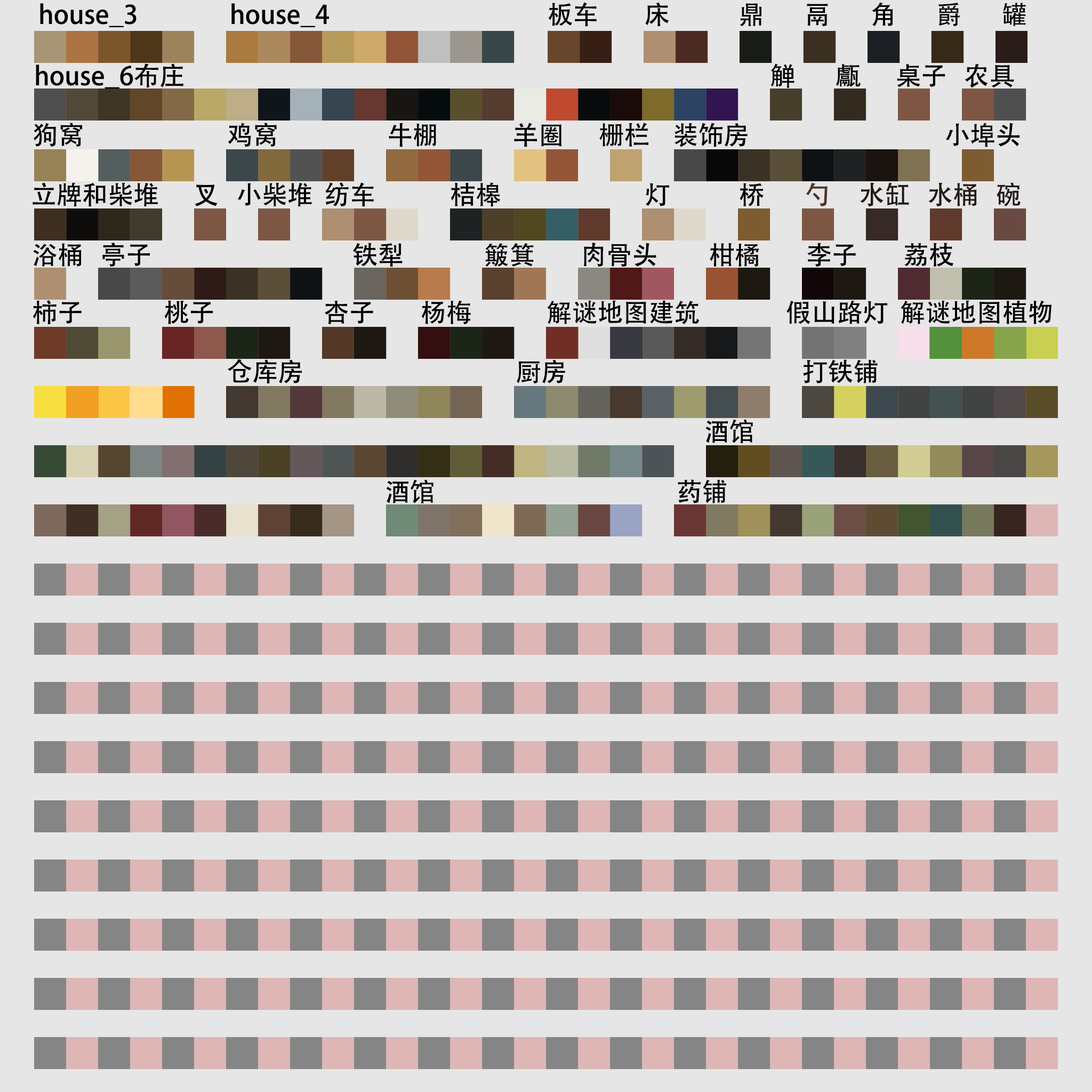
<style>
.page{position:relative;width:1092px;height:1092px;background:#e6e6e6}
.page>*{position:absolute;margin:0}
.t1{font:25.6px "AdobeHeitiStd-Regular";color:#000000}
.t2{font:25.6px "AdobeHeitiStd-Regular";color:#4f3526}
.t3{font:25.6px "AdobeHeitiStd-Regular";color:#221916}
</style>
<div class="page">
<p class="t1" style="left:40px;top:2px;width:986px;height:25px">house_3                house_4                                      板车        床            鼎       鬲       角       爵       罐</p>
<p class="t1" style="left:36px;top:63px;width:978px;height:26px">house_6布庄                                                                                                      觯       甗      桌子   农具</p>
<p class="t1" style="left:34px;top:123px;width:986px;height:24px">狗窝                         鸡窝                   牛棚             羊圈      栅栏    装饰房                                  小埠头</p>
<p class="t1" style="left:33px;top:182px;width:988px;height:25px">立牌和柴堆      叉   小柴堆  纺车             桔槔                         灯            桥       <span class="t2">勺     </span><span class="t3">水缸   水桶   碗</span></p>
<p class="t1" style="left:33px;top:242px;width:921px;height:25px">浴桶   亭子                                   铁犁              簸箕        肉骨头         柑橘        李子        荔枝</p>
<p class="t1" style="left:33px;top:300px;width:1018px;height:24px">柿子              桃子                   杏子        杨梅             解谜地图建筑               假山路灯  解谜地图植物</p>
<p class="t1" style="left:228px;top:359px;width:650px;height:25px">仓库房                                     厨房                                         打铁铺</p>
<p class="t1" style="left:705px;top:419px;width:48px;height:24px">酒馆</p>
<p class="t1" style="left:386px;top:479px;width:340px;height:24px">酒馆                                          药铺</p>
</div>
